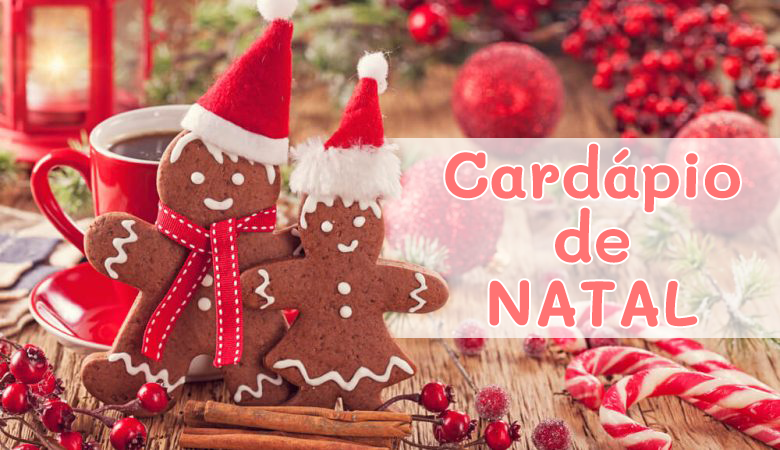
<style>
.page{position:relative;width:780px;height:450px}
.page>*{position:absolute;margin:0}
.t1{font:64px/64px "Mali-Bold";color:#ff7373}
</style>
<div class="page">
<p class="t1" style="left:445px;top:143px;width:295px;height:184px;text-align:center">Cardápio<br>de<br>NATAL</p>
</div>
